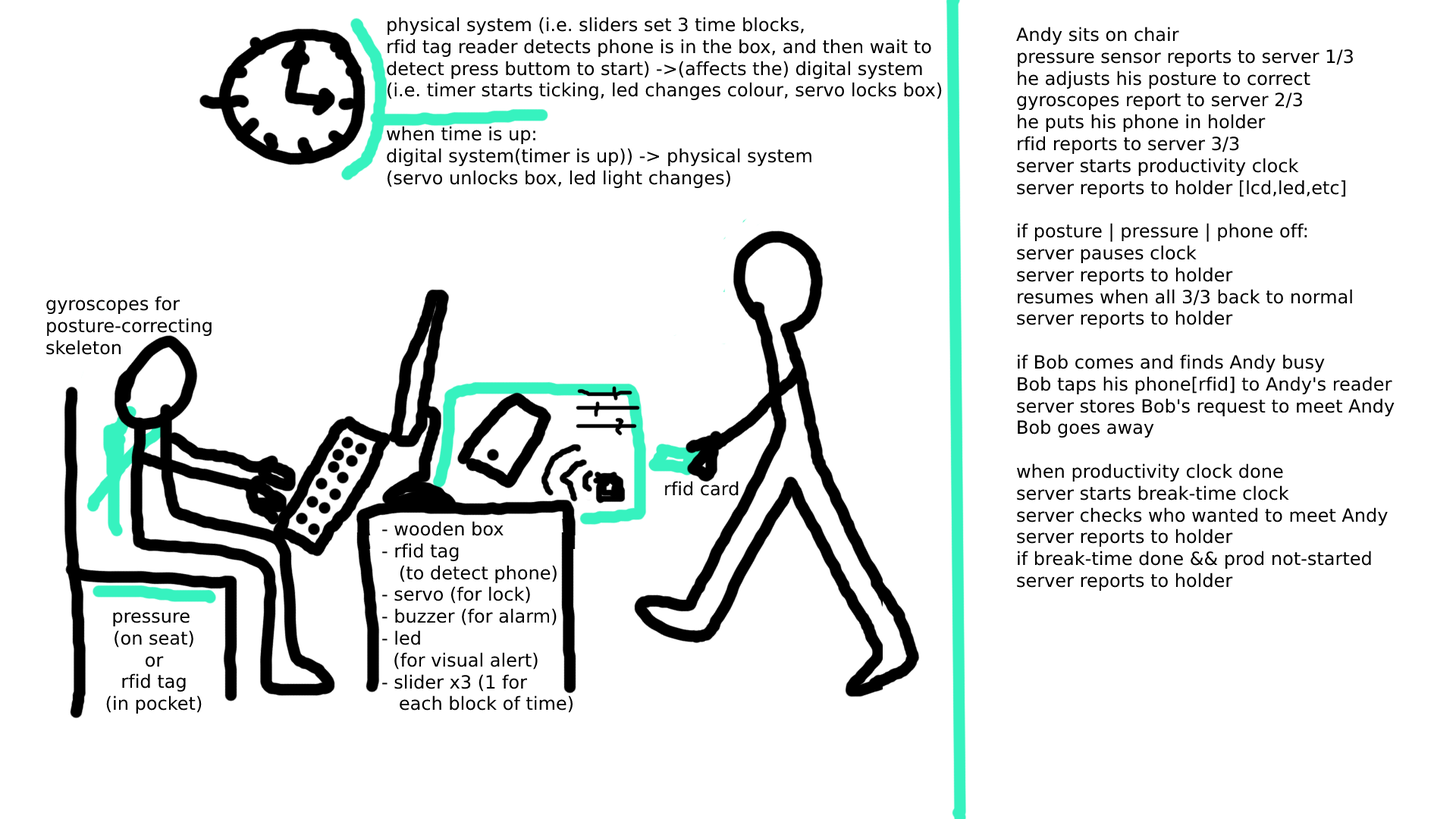
<style>
.page{position:relative;width:1456px;height:819px;background:#ffffff}
.page>*{position:absolute;margin:0}
.t1{font:18.2px "DejaVuSans";color:#000000}
.t2{font:18.2px "DejaVuSans";color:#36f2bf}
</style>
<div class="page">
<p class="t1" style="left:387px;top:17px;width:555px;height:171px">physical system (i.e. sliders set 3 time blocks, <br>rfid tag reader detects phone is in the box, and then wait to <br>detect press buttom to start) -&gt;(affects the) digital system <br>(i.e. timer starts ticking, led changes colour, servo locks box)<br><br>when time is up:<br>digital system(timer is up)) -&gt; physical system <br>(servo unlocks box, led light changes)</p>
<p class="t1" style="left:1016px;top:27px;width:379px;height:564px">Andy sits on chair<br>pressure sensor reports to server 1/3<br>he adjusts his posture to correct<br>gyroscopes report to server 2/3<br>he puts his phone in holder<br>rfid reports to server 3/3<br>server starts productivity clock <br>server reports to holder [lcd,led,etc]<br><br>if posture | pressure | phone off:<br>server pauses clock<br>server reports to holder<br>resumes when all 3/3 back to normal<br>server reports to holder<br><br>if Bob comes and finds Andy busy<br>Bob taps his phone[rfid] to Andy's reader<br>server stores Bob's request to meet Andy<br>Bob goes away<br><br>when productivity clock done<br>server starts break-time clock<br>server checks who wanted to meet Andy<br>server reports to holder<br>if break-time done &amp;&amp; prod not-started<br>server reports to holder</p>
<p class="t1" style="left:46px;top:296px;width:166px;height:59px">gyroscopes for <br>posture-correcting <br>skeleton</p>
<p class="t1" style="left:665px;top:481px;width:74px;height:15px"><span class="t2">r</span>fid card</p>
<p class="t1" style="left:382px;top:521px;width:191px;height:192px">- wooden box<br>- rfid tag <br>   (to detect phone)<br>- servo (for lock)<br>- buzzer (for alarm)<br>- led <br>  (for visual alert)<br>- slider x3 (1 for <br>   each block of time)</p>
<p class="t1" style="left:106px;top:612px;width:96px;height:102px;text-align:center">pressure <br>(on seat)<br>or<br>rfid tag<br>(in pocket)</p>
</div>
